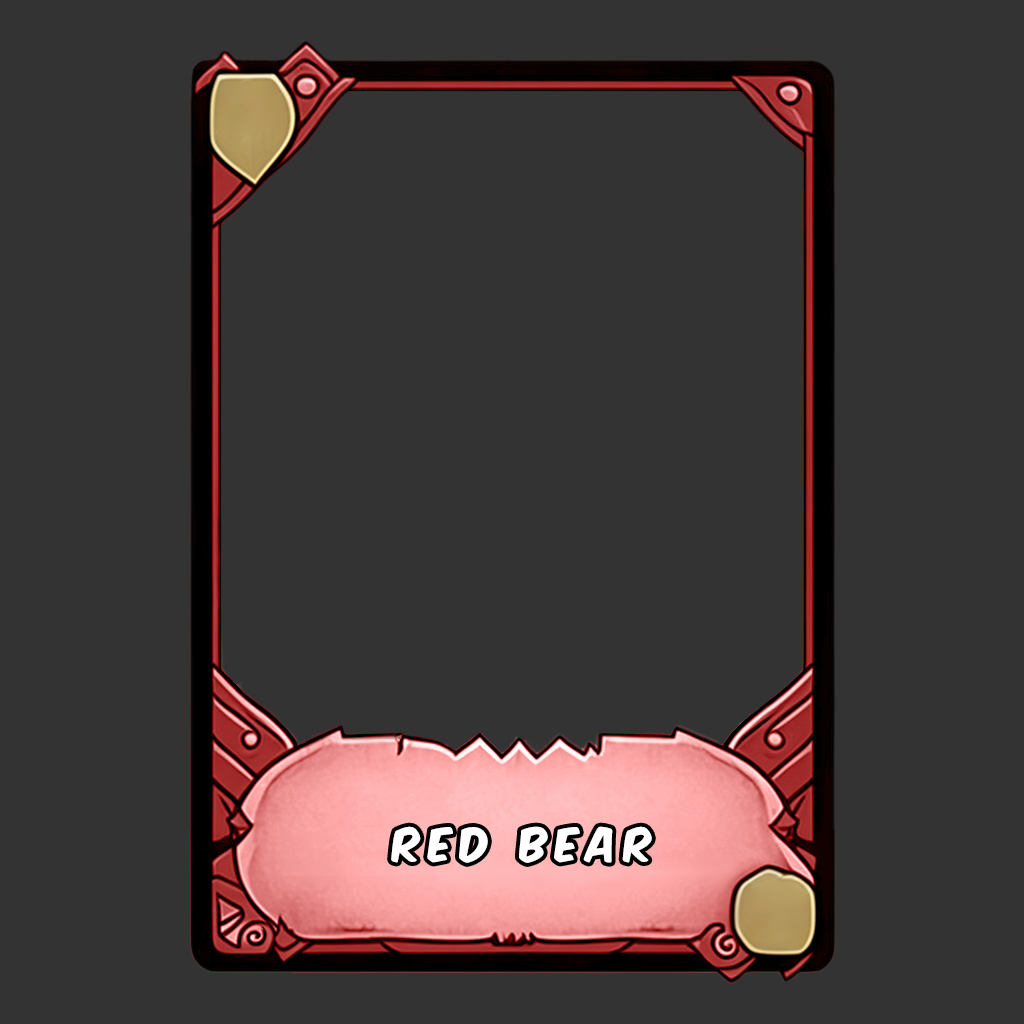
<style>
.page{position:relative;width:1024px;height:1024px;background:#333333}
.page>*{position:absolute;margin:0}
.t1{font:40px "KomikaAxis";letter-spacing:0.2em;color:#ffffff}
</style>
<div class="page">
<p class="t1" style="left:391px;top:826px;width:261px;height:37px">RED BEAR</p>
</div>
